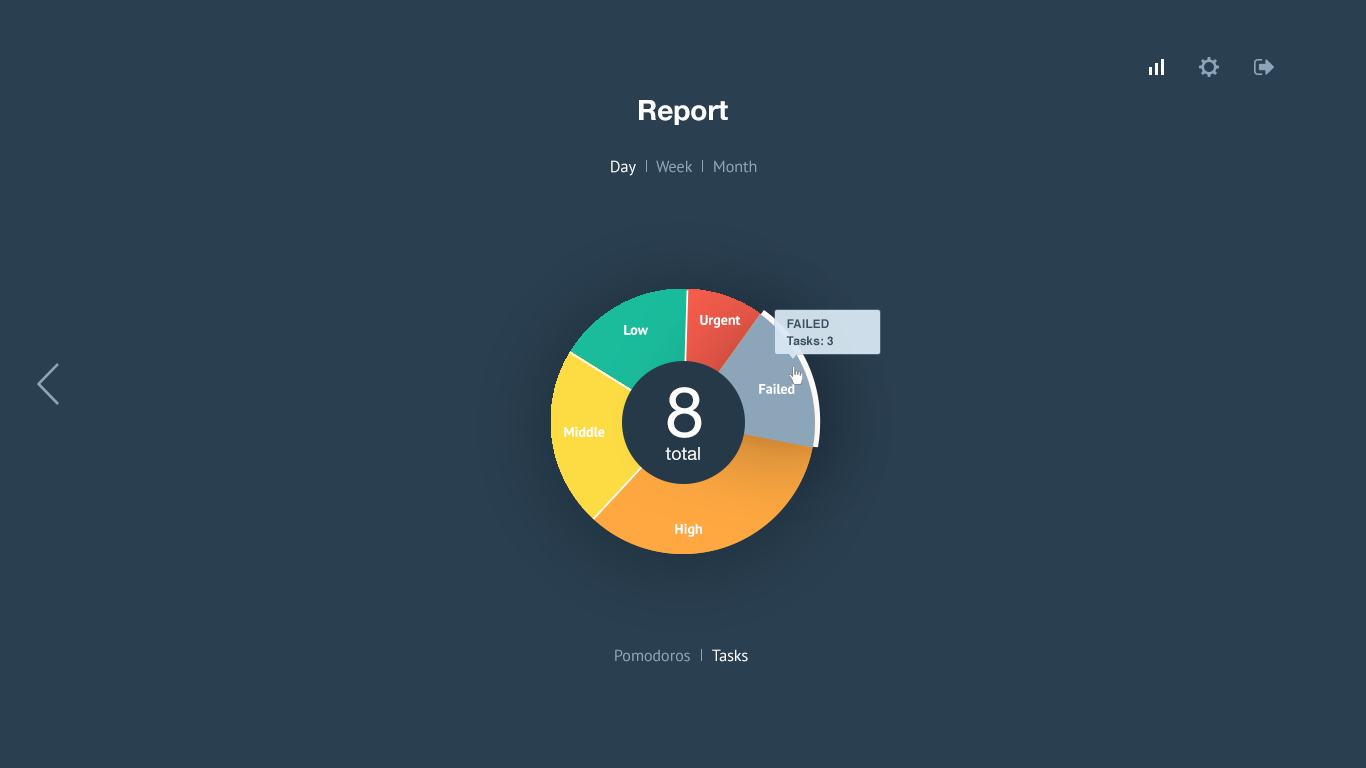
<style>
.page{position:relative;width:1366px;height:768px;background:#2a3f50}
.page>*{position:absolute;margin:0}
.t1{font:28px "HelveticaNeue-Bold";color:#ffffff}
.t2{font:16px "PTSans-Regular";color:#ffffff}
.t3{font:16px "PTSans-Regular";color:#8ea5b8}
.t4{font:14px "PTSans-Bold";color:#ffffff}
.t5{font:12px "Helvetica-Bold";color:#3c5162}
.t6{font:70px "HelveticaNeue";color:#ffffff}
.t7{font:18px "HelveticaNeue";color:#ffffff}
.t8{font:16px "PTSans-Regular";color:#8da5b8}
</style>
<div class="page">
<p class="t1" style="left:639px;top:100px;width:89px;height:25px">Report</p>
<p class="t2" style="left:611px;top:160px;width:25px;height:16px">Day</p>
<p class="t3" style="left:656px;top:160px;width:37px;height:13px">Week</p>
<p class="t3" style="left:714px;top:160px;width:43px;height:13px">Month</p>
<p class="t4" style="left:700px;top:315px;width:41px;height:13px">Urgent</p>
<p class="t4" style="left:624px;top:325px;width:24px;height:10px">Low</p>
<p class="t5" style="left:787px;top:319px;width:42px;height:9px">FAILED</p>
<p class="t5" style="left:786px;top:336px;width:47px;height:10px">Tasks: 3</p>
<p class="t6" style="left:667px;top:387px;width:35px;height:51px">8</p>
<p class="t4" style="left:759px;top:383px;width:36px;height:11px">Failed</p>
<p class="t4" style="left:564px;top:426px;width:41px;height:11px">Middle</p>
<p class="t7" style="left:665px;top:447px;width:35px;height:13px">total</p>
<p class="t4" style="left:675px;top:523px;width:27px;height:14px">High</p>
<p class="t8" style="left:615px;top:649px;width:75px;height:13px">Pomodoros</p>
<p class="t2" style="left:712px;top:649px;width:36px;height:13px">Tasks</p>
</div>
